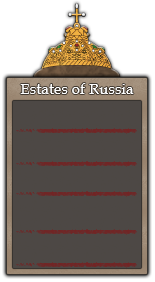
<style>
.page{position:relative;width:155px;height:282px;background:#4d4845}
.page>*{position:absolute;margin:0}
.t1{font:15.3px "BookAntiqua";color:#ffffff}
</style>
<div class="page">
<p class="t1" style="left:20px;top:83px;width:114px;height:11px">Estates of Russia</p>
</div>
